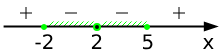
<style>
.page{position:relative;width:224px;height:54px;background:#ffffff}
.page>*{position:absolute;margin:0}
.t1{font:20px "DejaVuSans";color:#000000}
</style>
<div class="page">
<p class="t1" style="left:35px;top:34px;width:18px;height:15px">-2</p>
<p class="t1" style="left:91px;top:34px;width:11px;height:15px">2</p>
<p class="t1" style="left:143px;top:34px;width:10px;height:16px">5</p>
<p class="t1" style="left:203px;top:38px;width:11px;height:11px">x</p>
</div>
